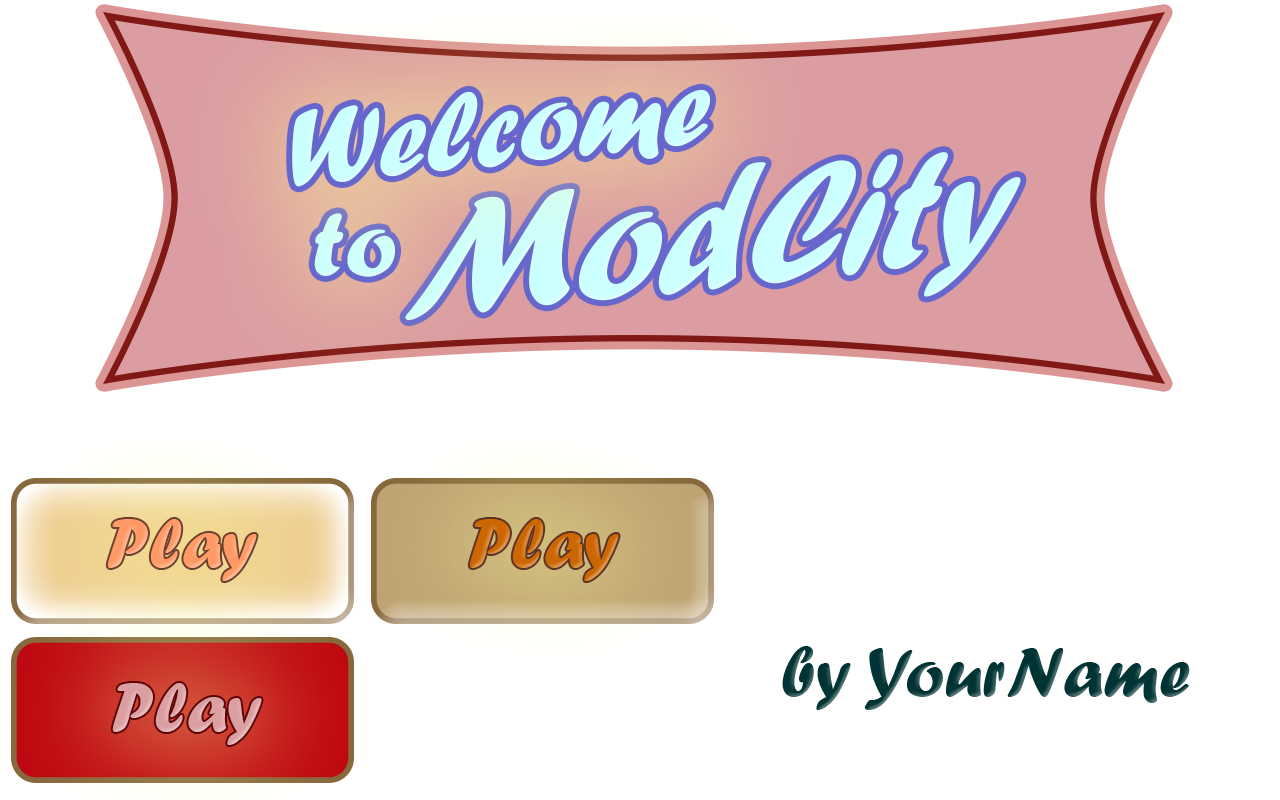
<style>
.page{position:relative;width:1280px;height:800px;background:#ffffff}
.page>*{position:absolute;margin:0}
.t1{font:114.3px "ForteMT";color:#ccffff}
.t2{font:180.3px "ForteMT";color:#ccffff;scale:0.86 1}
.t3{font:95.8px "ForteMT";color:#ccffff}
.t4{font:72px "ForteMT";color:#ff9966}
.t5{font:72px "ForteMT";color:#cc6600}
.t6{font:72px "ForteMT";color:#003333}
.t7{font:72px "ForteMT";color:#db9ea1}
</style>
<div class="page">
<p class="t1" style="left:292px;top:89px;width:418px;height:98px;rotate:-6deg">Welcome</p>
<p class="t2" style="left:405px;top:152px;width:616px;height:169px;rotate:-6deg">ModCity</p>
<p class="t3" style="left:314px;top:213px;width:81px;height:64px;rotate:-1deg">to</p>
<p class="t4" style="left:107px;top:519px;width:150px;height:62px">Play</p>
<p class="t5" style="left:469px;top:519px;width:150px;height:62px">Play</p>
<p class="t6" style="left:782px;top:646px;width:408px;height:64px">by YourName</p>
<p class="t7" style="left:112px;top:683px;width:150px;height:62px">Play</p>
</div>
